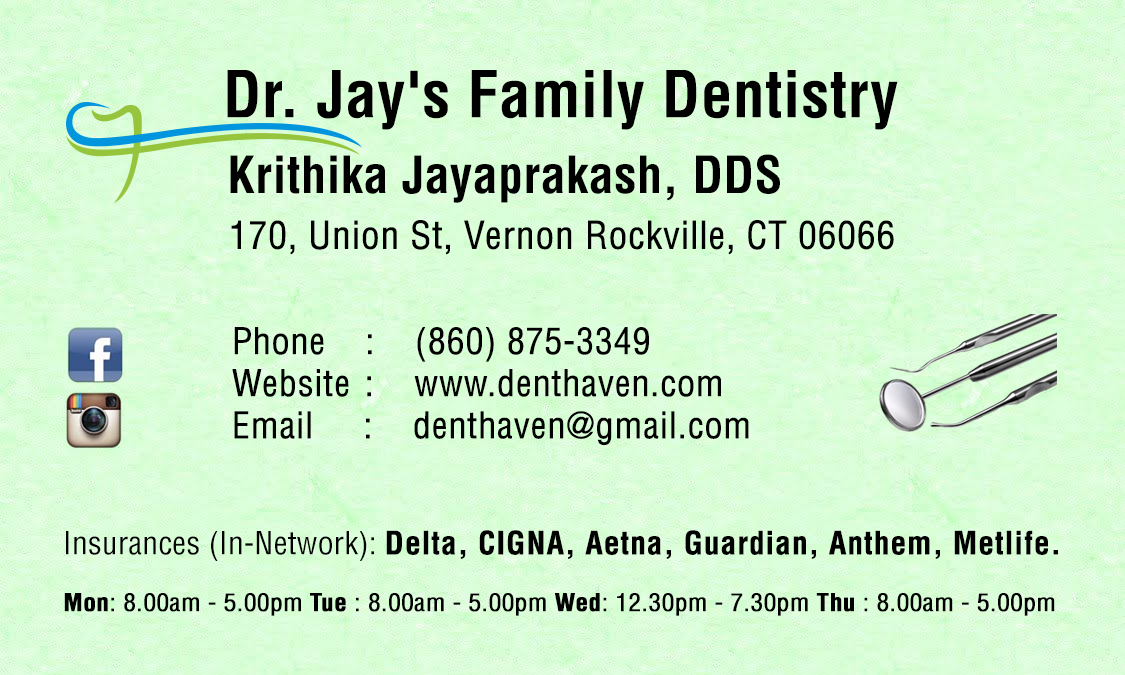
<style>
.page{position:relative;width:1125px;height:675px}
.page>*{position:absolute;margin:0}
.t1{font:63px "HelveticaLT-Condensed-Bold";letter-spacing:0.01em;color:#000000}
.t2{font:50.1px "HelveticaLT-Condensed-Bold";letter-spacing:0.01em;color:#000000}
.t3{font:37.3px "HelveticaLT-Condensed";color:#000000;font-weight:bold}
.t4{font:35.4px/42.1px "HelveticaLT-Condensed";color:#000000;font-weight:bold}
.t5{font:31.1px "HelveticaLT-Condensed-Bold";letter-spacing:0.005em;color:#000000;font-weight:bold}
.t6{font:31.1px "HelveticaLT-Condensed";letter-spacing:0.005em;color:#000000}
.t7{font:24px "HelveticaLT-Condensed";color:#000000;font-weight:bold;scale:1.03 1}
.t8{font:24px "HelveticaLT-Condensed-Bold";color:#000000;font-weight:bold;scale:1.03 1}
</style>
<div class="page">
<p class="t1" style="left:227px;top:70px;width:671px;height:60px">Dr. Jay's Family Dentistry</p>
<p class="t2" style="left:230px;top:154px;width:550px;height:49px">Krithika Jayaprakash, DDS</p>
<p class="t3" style="left:231px;top:220px;width:663px;height:35px">170, Union St, Vernon Rockville, CT 06066</p>
<p class="t4" style="left:232px;top:327px;width:517px;height:119px">Phone    :    (860) 875-3349<br>Website :    www.denthaven.com<br>Email     :    denthaven@gmail.com</p>
<p class="t5" style="left:66px;top:530px;width:992px;height:31px"><span class="t6">Insurances (In-Network): </span>Delta, CIGNA, Aetna, Guardian, Anthem, Metlife.</p>
<p class="t7" style="left:64px;top:593px;width:991px;height:23px"><span class="t8">Mon</span>: 8.00am - 5.00pm <span class="t8">Tue</span> : 8.00am - 5.00pm <span class="t8">Wed</span>: 12.30pm - 7.30pm <span class="t8">Thu</span> : 8.00am - 5.00pm</p>
</div>
